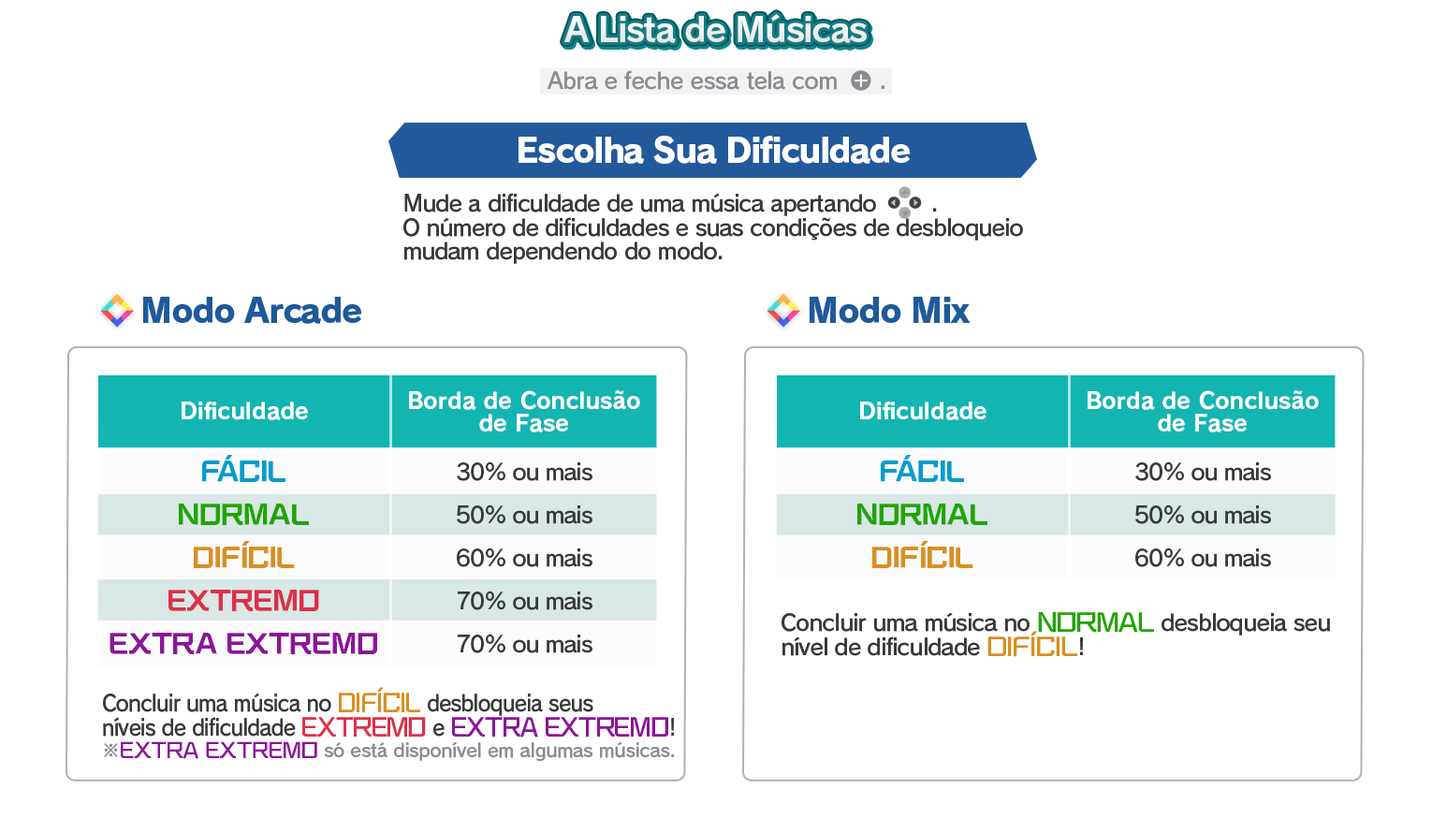
<style>
.page{position:relative;width:1432px;height:833px;background:#ffffff}
.page>*{position:absolute;margin:0}
.t1{font:33.7px "RodinPro-B";letter-spacing:-0.039em;color:#efeff0}
.t2{font:22.5px "RodinPro-DB";letter-spacing:-0.025em;color:#8c8b93}
.t3{font:33.7px "RodinPro-EB";letter-spacing:-0.048em;color:#ffffff}
.t4{font:22.5px/23.7px "RodinPro-DB";letter-spacing:-0.04em;color:#383a3a}
.t5{font:33.7px "RodinPro-EB";letter-spacing:-0.04em;color:#1f599a}
.t6{font:22.5px "RodinPro-B";letter-spacing:0.002em;color:#fbffff}
.t7{font:22.5px/22.5px "RodinPro-B";letter-spacing:0.002em;color:#fbffff}
.t8{font:23.7px "KafuTechnoStd-U";letter-spacing:0.011em;color:#009ccf}
.t9{font:22.5px "RodinPro-DB";letter-spacing:-0.048em;color:#383a3a}
.t10{font:23.7px "KafuTechnoStd-U";letter-spacing:0.011em;color:#21a500}
.t11{font:23.7px "KafuTechnoStd-U";letter-spacing:0.011em;color:#d98f21}
.t12{font:23.7px "KafuTechnoStd-U";letter-spacing:0.011em;color:#dd3048}
.t13{font:22.5px/23.7px "KafuTechnoStd-E";letter-spacing:-0.04em;color:#21a500}
.t14{font:22.5px/23.7px "KafuTechnoStd-E";letter-spacing:-0.04em;color:#d98f21}
.t15{font:23.7px "KafuTechnoStd-U";letter-spacing:0.011em;color:#8a1598}
.t16{font:22.5px/23.7px "RodinPro-DB";letter-spacing:-0.04em;color:#383a3a;scale:0.92 1}
.t17{font:22.5px/23.7px "KafuTechnoStd-E";letter-spacing:-0.04em;color:#d98f21;scale:0.92 1}
.t18{font:22.5px/23.7px "KafuTechnoStd-E";letter-spacing:-0.04em;color:#dd3048;scale:0.92 1}
.t19{font:22.5px/23.7px "KafuTechnoStd-E";letter-spacing:-0.04em;color:#8a1598;scale:0.92 1}
.t20{font:18.7px "RodinPro-DB";letter-spacing:-0.014em;color:#8c8b92;scale:0.97 1}
.t21{font:18.7px "KafuTechnoStd-E";letter-spacing:-0.014em;color:#8a1598;scale:0.97 1}
</style>
<div class="page">
<p class="t1" style="left:564px;top:14px;width:303px;height:29px">A Lista de Músicas</p>
<p class="t2" style="left:547px;top:70px;width:290px;height:20px">Abra e feche essa tela com</p>
<p class="t2" style="left:881px;top:85px;width:3px;height:4px">.</p>
<p class="t3" style="left:518px;top:136px;width:393px;height:28px">Escolha Sua Dificuldade</p>
<p class="t4" style="left:403px;top:193px;width:620px;height:71px">Mude a dificuldade de uma música apertando        .<br>O número de dificuldades e suas condições de desbloqueio<br>mudam dependendo do modo.</p>
<p class="t5" style="left:143px;top:297px;width:218px;height:27px">Modo Arcade</p>
<p class="t5" style="left:809px;top:297px;width:161px;height:26px">Modo Mix</p>
<p class="t6" style="left:182px;top:401px;width:126px;height:19px">Dificuldade</p>
<p class="t7" style="left:409px;top:390px;width:231px;height:42px;text-align:center">Borda de Conclusão<br>de Fase</p>
<p class="t6" style="left:860px;top:401px;width:126px;height:19px">Dificuldade</p>
<p class="t7" style="left:1087px;top:390px;width:232px;height:42px;text-align:center">Borda de Conclusão<br>de Fase</p>
<p class="t8" style="left:202px;top:455px;width:83px;height:27px">FÁCIL</p>
<p class="t9" style="left:457px;top:461px;width:135px;height:20px">30% ou mais</p>
<p class="t8" style="left:881px;top:455px;width:83px;height:27px">FÁCIL</p>
<p class="t9" style="left:1135px;top:461px;width:136px;height:20px">30% ou mais</p>
<p class="t10" style="left:179px;top:503px;width:130px;height:22px">NORMAL</p>
<p class="t9" style="left:457px;top:504px;width:135px;height:20px">50% ou mais</p>
<p class="t10" style="left:857px;top:503px;width:130px;height:22px">NORMAL</p>
<p class="t9" style="left:1135px;top:504px;width:136px;height:20px">50% ou mais</p>
<p class="t11" style="left:194px;top:541px;width:101px;height:27px">DIFÍCIL</p>
<p class="t11" style="left:872px;top:541px;width:101px;height:27px">DIFÍCIL</p>
<p class="t9" style="left:457px;top:547px;width:135px;height:20px">60% ou mais</p>
<p class="t9" style="left:1135px;top:547px;width:136px;height:20px">60% ou mais</p>
<p class="t12" style="left:168px;top:590px;width:151px;height:21px">EXTREMO</p>
<p class="t9" style="left:457px;top:590px;width:135px;height:20px">70% ou mais</p>
<p class="t4" style="left:781px;top:612px;width:549px;height:45px">Concluir uma música no <span class="t13">NORMAL</span> desbloqueia seu<br>nível de dificuldade <span class="t14">DIFÍCIL</span>!</p>
<p class="t15" style="left:109px;top:633px;width:268px;height:21px">EXTRA EXTREMO</p>
<p class="t9" style="left:457px;top:634px;width:135px;height:19px">70% ou mais</p>
<p class="t16" style="left:103px;top:687px;width:571px;height:50px">Concluir uma música no <span class="t17">DIFÍCIL</span> desbloqueia seus<br>níveis de dificuldade <span class="t18">EXTREMO </span>e <span class="t19">EXTRA EXTREMO</span>!</p>
<p class="t20" style="left:104px;top:741px;width:570px;height:20px">※<span class="t21">EXTRA EXTREMO</span> só está disponível em algumas músicas.</p>
</div>
